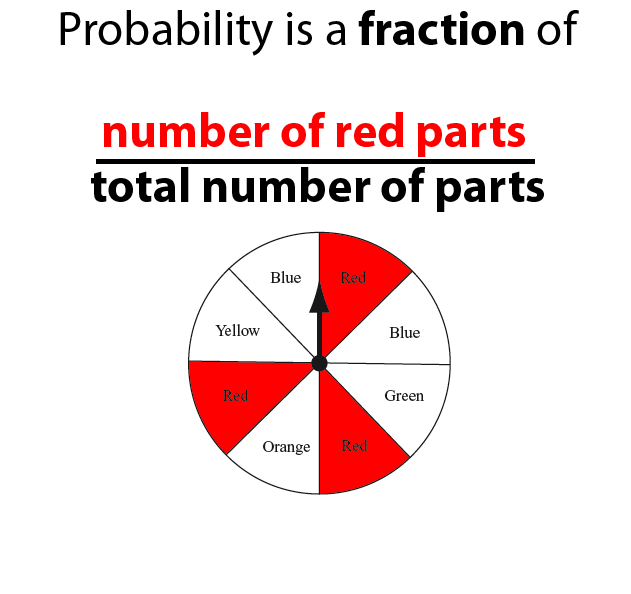
<style>
.page{position:relative;width:631px;height:594px;background:#ffffff}
.page>*{position:absolute;margin:0}
.t1{font:48px "MyriadPro-Regular";color:#000000}
.t2{font:48px "MyriadPro-Bold";color:#000000}
.t3{font:48px "MyriadPro-Bold";color:#ff0000}
</style>
<div class="page">
<p class="t1" style="left:60px;top:10px;width:519px;height:46px">Probability is a <span class="t2">fraction</span> of</p>
<p class="t3" style="left:103px;top:112px;width:422px;height:45px">number of red parts</p>
<p class="t2" style="left:91px;top:167px;width:453px;height:45px">total number of parts</p>
</div>
